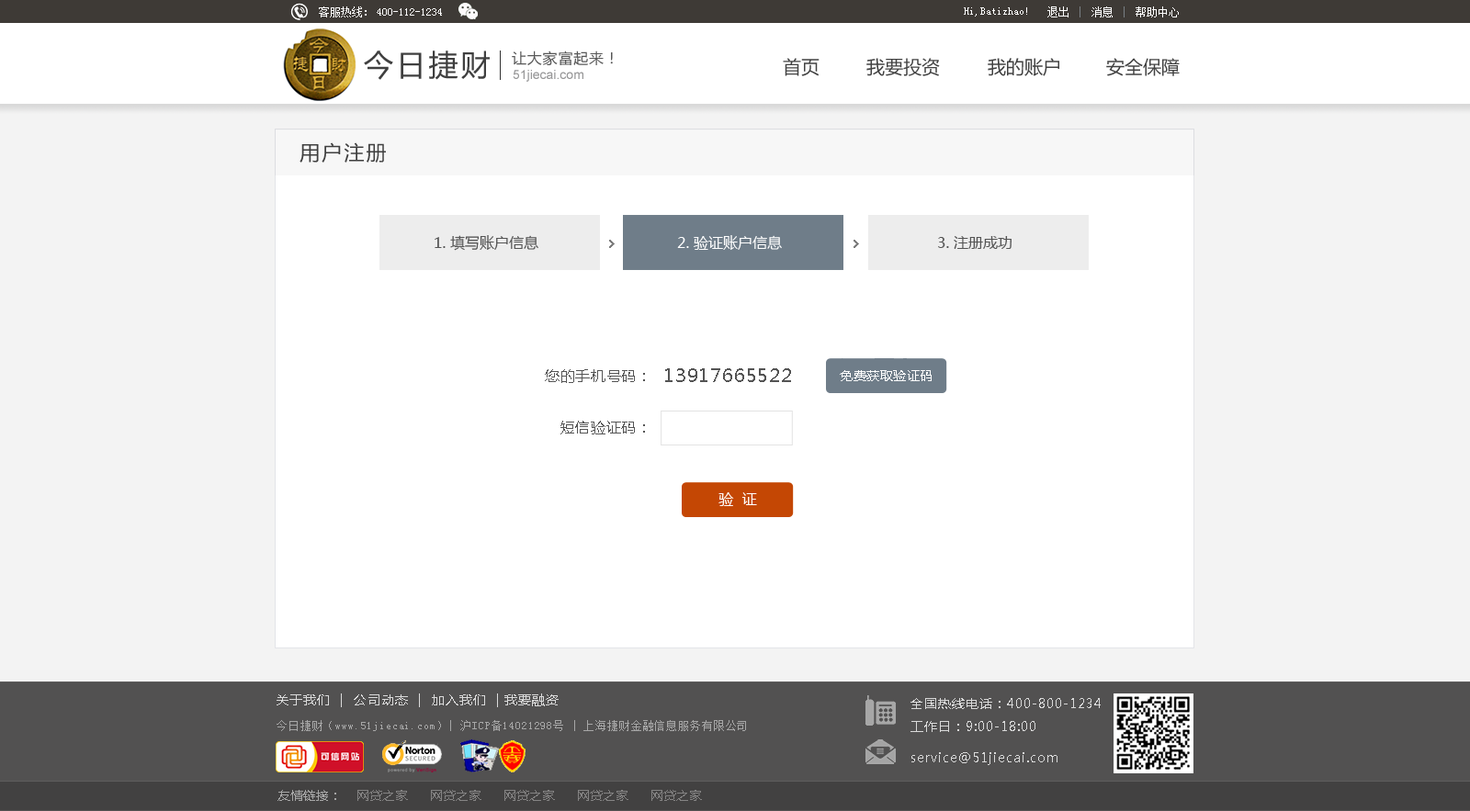
<style>
.page{position:relative;width:1470px;height:811px;background:#ffffff}
.page>*{position:absolute;margin:0}
.t1{font:11px "SimSun";color:#ffffff}
.t2{font:29.4px "MicrosoftYaHei";letter-spacing:0.1em;color:#3f3f3f}
.t3{font:14.7px "MicrosoftYaHei";letter-spacing:0.05em;color:#575757}
.t4{font:18.4px "MicrosoftYaHei";color:#414141}
.t5{font:12.9px "ArialMT";color:#969697}
.t6{font:20.2px "MicrosoftYaHei";letter-spacing:0.1em;color:#3f3f3f}
.t7{font:14.7px "MicrosoftYaHei";color:#545454}
.t8{font:14.7px "MicrosoftYaHei";color:#ffffff}
.t9{font:14.7px "MicrosoftYaHei";letter-spacing:0.04em;color:#545454}
.t10{font:18.4px "MicrosoftYaHei";letter-spacing:0.04em;color:#545454}
.t11{font:12.9px "MicrosoftYaHei";letter-spacing:0.04em;color:#fffefe}
.t12{font:12.9px "MicrosoftYaHei";letter-spacing:0.07em;color:#dbdbdb}
.t13{font:12.9px "MicrosoftYaHei";letter-spacing:0.07em;color:#dadada}
.t14{font:11px "SimSun";letter-spacing:0.07em;color:#a7a7a7}
.t15{font:12.9px "MicrosoftYaHei";color:#858484}
.t16{font:12.9px "MicrosoftYaHei";color:#a7a7a7}
</style>
<div class="page">
<p class="t1" style="left:319px;top:6px;width:48px;height:11px">客服热线：</p>
<p class="t1" style="left:377px;top:8px;width:65px;height:8px">400-112-1234</p>
<p class="t1" style="left:964px;top:7px;width:63px;height:10px">Hi,Batizhao!</p>
<p class="t1" style="left:1047px;top:6px;width:132px;height:11px">退出    消息    帮助中心</p>
<p class="t2" style="left:364px;top:51px;width:126px;height:29px">今日捷财</p>
<p class="t3" style="left:512px;top:51px;width:101px;height:14px">让大家富起来！</p>
<p class="t4" style="left:783px;top:58px;width:36px;height:18px">首页</p>
<p class="t4" style="left:866px;top:58px;width:74px;height:18px">我要投资</p>
<p class="t4" style="left:988px;top:58px;width:71px;height:18px">我的账户</p>
<p class="t4" style="left:1106px;top:58px;width:74px;height:18px">安全保障</p>
<p class="t5" style="left:513px;top:70px;width:70px;height:12px">51jiecai.com</p>
<p class="t6" style="left:299px;top:142px;width:87px;height:21px">用户注册</p>
<p class="t7" style="left:435px;top:235px;width:103px;height:16px">1. 填写账户信息</p>
<p class="t8" style="left:677px;top:235px;width:105px;height:15px">2. 验证账户信息</p>
<p class="t7" style="left:938px;top:236px;width:73px;height:13px">3. 注册成功</p>
<p class="t9" style="left:545px;top:369px;width:100px;height:66px;text-align:right">您的手机号码：<br><br>短信验证码：</p>
<p class="t10" style="left:665px;top:368px;width:126px;height:14px">13917665522</p>
<p class="t11" style="left:840px;top:370px;width:92px;height:11px">免费获取验证码</p>
<p class="t8" style="left:718px;top:492px;width:39px;height:14px">验  证</p>
<p class="t12" style="left:277px;top:694px;width:282px;height:13px">关于我们  |  公司动态  |  加入我们  | 我要融资</p>
<p class="t13" style="left:910px;top:698px;width:191px;height:34px">全国热线电话：400-800-1234<br>工作日：9:00-18:00</p>
<p class="t14" style="left:277px;top:720px;width:469px;height:11px">今日捷财（www.51jiecai.com）| 沪ICP备14021298号 | 上海捷财金融信息服务有限公司</p>
<p class="t13" style="left:911px;top:752px;width:146px;height:13px">service@51jiecai.com</p>
<p class="t15" style="left:277px;top:790px;width:425px;height:11px"><span class="t16">友情链接：</span>    网贷之家      网贷之家      网贷之家      网贷之家      网贷之家</p>
</div>
